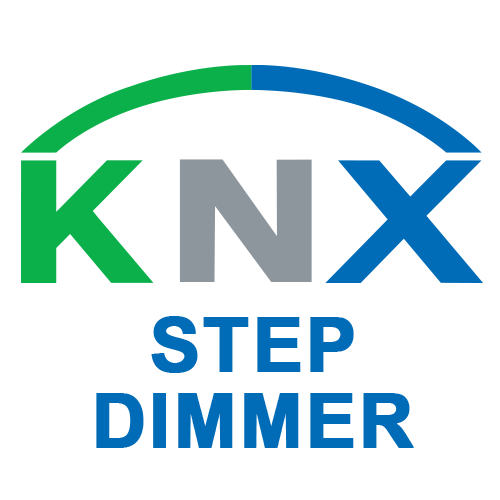
<style>
.page{position:relative;width:500px;height:500px;background:#ffffff}
.page>*{position:absolute;margin:0}
.t1{font:75px "Arial-BoldMT";letter-spacing:0.02em;color:#006bb6;text-transform:uppercase;font-weight:bold}
</style>
<div class="page">
<p class="t1" style="left:151px;top:316px;width:203px;height:57px">STEP</p>
<p class="t1" style="left:96px;top:393px;width:318px;height:55px">DIMMER</p>
</div>
